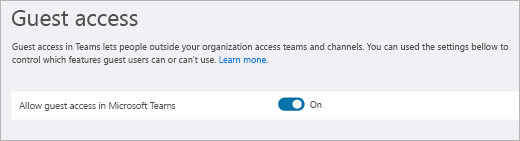
<style>
.page{position:relative;width:520px;height:141px;background:#f0f1f5}
.page>*{position:absolute;margin:0}
.t1{font:22.7px "SegoeUI";color:#505050}
.t2{font:9.1px/13.3px "SegoeUI";color:#505050}
.t3{font:9.1px/13.3px "SegoeUI";color:#0078d7}
.t4{font:9.6px "SegoeUI-Semilight";color:#505050}
.t5{font:9.1px "SegoeUI";color:#505050}
</style>
<div class="page">
<p class="t1" style="left:11px;top:10px;width:127px;height:16px">Guest access</p>
<p class="t2" style="left:12px;top:43px;width:497px;height:22px">Guest access in Teams lets people outside your organization access teams and channels. You can used the settings bellow to<br>control which features guest users can or can’t use. <span class="t3">Learn mone.</span></p>
<p class="t4" style="left:19px;top:102px;width:157px;height:9px">Allow guest access in Microsoft Teams</p>
<p class="t5" style="left:310px;top:101px;width:12px;height:7px">On</p>
</div>
